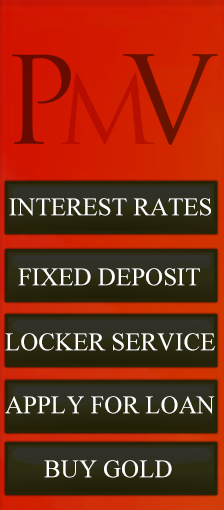
<style>
.page{position:relative;width:224px;height:510px}
.page>*{position:absolute;margin:0}
.t1{font:25px "TimesNewRomanPSMT";color:#ffffff}
</style>
<div class="page">
<p class="t1" style="left:9px;top:198px;width:202px;height:18px">INTEREST RATES</p>
<p class="t1" style="left:18px;top:268px;width:182px;height:18px">FIXED DEPOSIT</p>
<p class="t1" style="left:5px;top:333px;width:210px;height:18px">LOCKER SERVICE</p>
<p class="t1" style="left:5px;top:396px;width:210px;height:18px">APPLY FOR LOAN</p>
<p class="t1" style="left:44px;top:460px;width:128px;height:18px">BUY GOLD</p>
</div>
